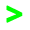
<style>
.page{position:relative;width:30px;height:30px;background:#ffffff}
.page>*{position:absolute;margin:0}
.t1{font:30px "MicrosoftYaHei-Bold";color:#00ff00;font-weight:bold}
</style>
<div class="page">
<p class="t1" style="left:6px;top:5px;width:17px;height:18px">&gt;</p>
</div>
